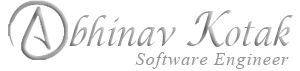
<style>
.page{position:relative;width:300px;height:71px;background:#ffffff}
.page>*{position:absolute;margin:0}
.t1{font:36px "LucidaCalligraphy-Italic";font-style:italic;scale:0.79 1}
.t2{font:47.7px "LucidaCalligraphy-Italic";font-style:italic;scale:0.79 1}
.t3{font:18.5px "TimesNewRomanPS-ItalicMT";letter-spacing:0.05em;color:#959595}
</style>
<div class="page">
<p class="t1" style="left:69px;top:10px;width:224px;height:37px">bhinav <span class="t2">K</span>otak</p>
<p class="t3" style="left:135px;top:52px;width:154px;height:17px">Software Engineer</p>
</div>
